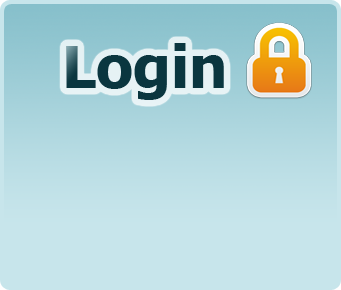
<style>
.page{position:relative;width:341px;height:290px;background:#c7e5eb}
.page>*{position:absolute;margin:0}
.t1{font:57.8px "Tahoma-Bold";color:#0a363f;scale:1.04 1}
</style>
<div class="page">
<p class="t1" style="left:66px;top:43px;width:158px;height:57px">Login</p>
</div>
